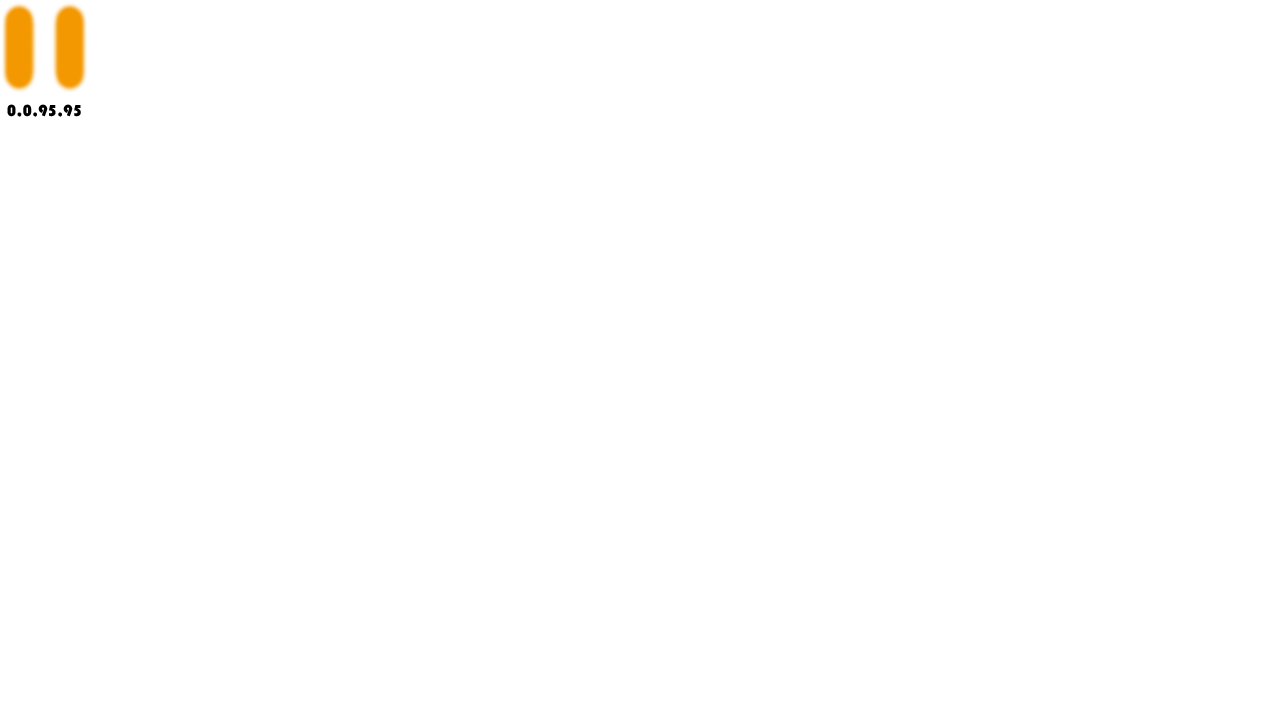
<style>
.page{position:relative;width:1280px;height:720px;background:#ffffff}
.page>*{position:absolute;margin:0}
.t1{font:16.7px "STHupo";color:#000000}
</style>
<div class="page">
<p class="t1" style="left:7px;top:104px;width:74px;height:13px">0,0,95,95</p>
</div>
